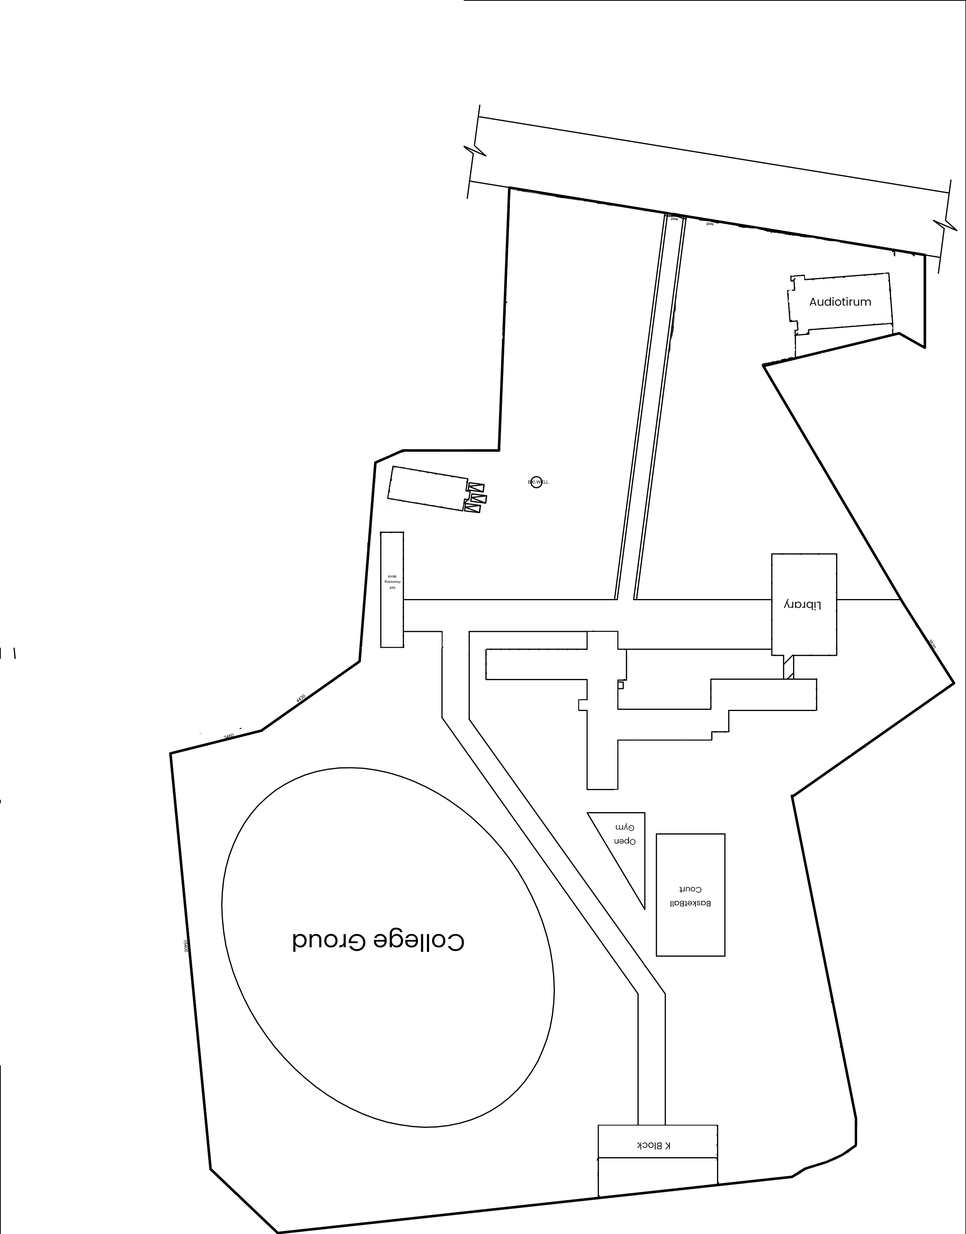
<style>
.page{position:relative;width:966px;height:1234px;background:#ffffff}
.page>*{position:absolute;margin:0}
.t1{font:11.3px "Poppins-Regular";color:#000000}
.t2{font:3.2px "Poppins-Regular";color:#000000}
.t3{font:8px "Poppins-Regular";color:#000000}
.t4{font:24.1px "Poppins-Regular";color:#000000}
.t5{font:9.7px "Poppins-Regular";color:#000000}
</style>
<div class="page">
<p class="t1" style="left:810px;top:297px;width:61px;height:9px">Audiotirum</p>
<p class="t2" style="left:385px;top:575px;width:15px;height:15px;text-align:center;rotate:180deg">Self <br>Financing <br>Block</p>
<p class="t1" style="left:784px;top:599px;width:36px;height:12px;rotate:180deg">Library</p>
<p class="t3" style="left:614px;top:823px;width:22px;height:22px;text-align:center;rotate:180deg">Open<br>Gym</p>
<p class="t3" style="left:670px;top:887px;width:41px;height:20px;text-align:center;rotate:180deg">BasketBall<br>Court</p>
<p class="t4" style="left:293px;top:928px;width:171px;height:25px;rotate:-180deg">College Groud</p>
<p class="t5" style="left:637px;top:1142px;width:33px;height:8px;rotate:180deg">K Block</p>
</div>
